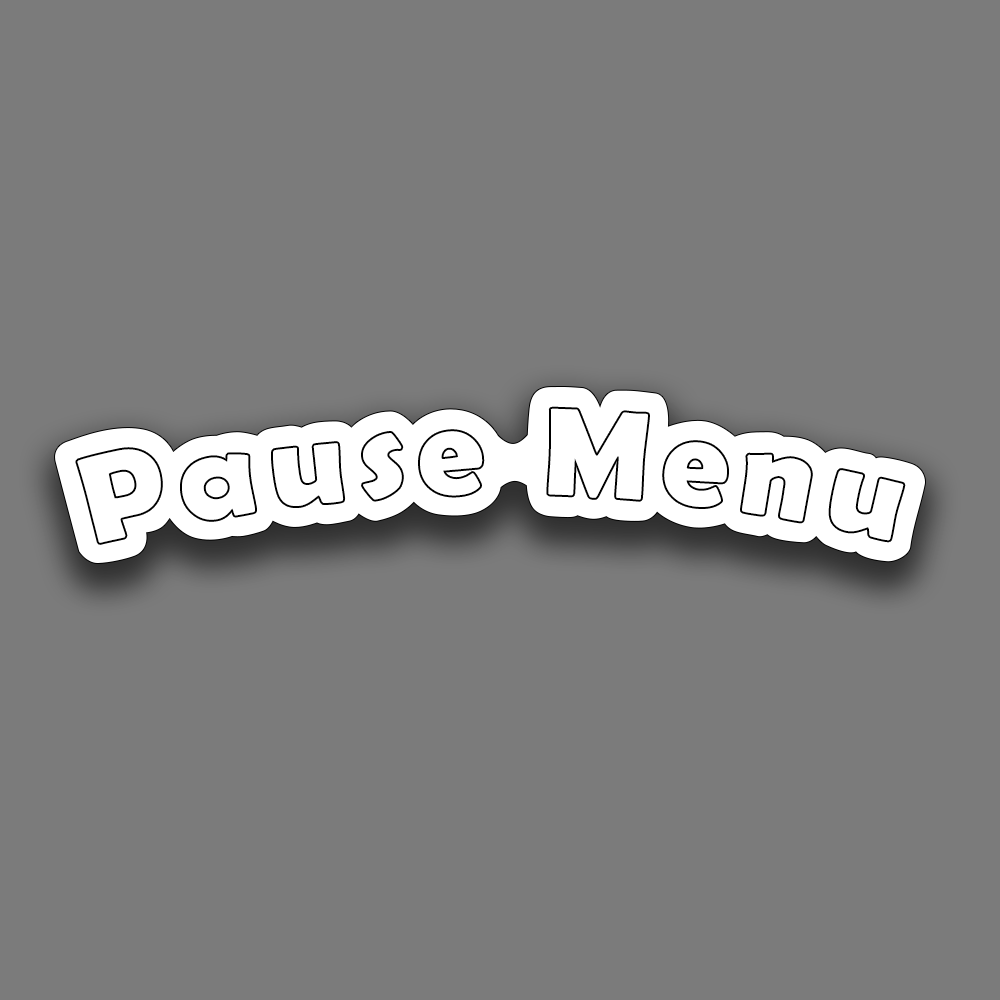
<style>
.page{position:relative;width:1000px;height:1000px;background:#7b7b7b}
.page>*{position:absolute;margin:0}
.t1{font:125.5px "BerlinSansFBDemi-Bold";letter-spacing:0.1em;color:#ffffff}
</style>
<div class="page">
<p class="t1" style="left:77px;top:408px;width:827px;height:135px">Pause Menu</p>
</div>
